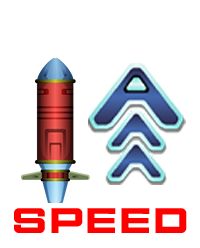
<style>
.page{position:relative;width:200px;height:248px;background:#ffffff}
.page>*{position:absolute;margin:0}
.t1{font:35.5px "SportyPro-BoldXP";color:#ff0000}
</style>
<div class="page">
<p class="t1" style="left:14px;top:208px;width:173px;height:25px">SPEED</p>
</div>
